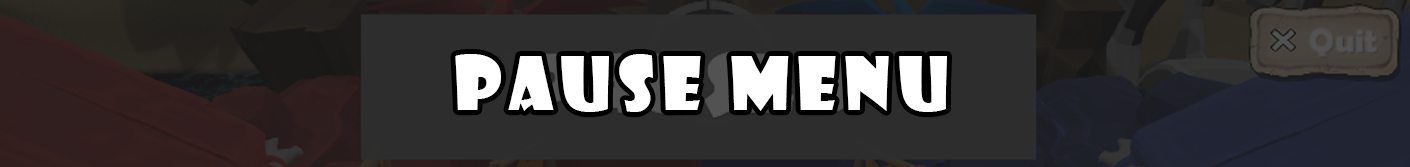
<style>
.page{position:relative;width:1410px;height:167px;background:#2d2d2d}
.page>*{position:absolute;margin:0}
.t1{font:72px "ShowcardGothic-Reg";letter-spacing:0.1em;color:#ffffff}
</style>
<div class="page">
<p class="t1" style="left:455px;top:54px;width:492px;height:58px">Pause Menu</p>
</div>
